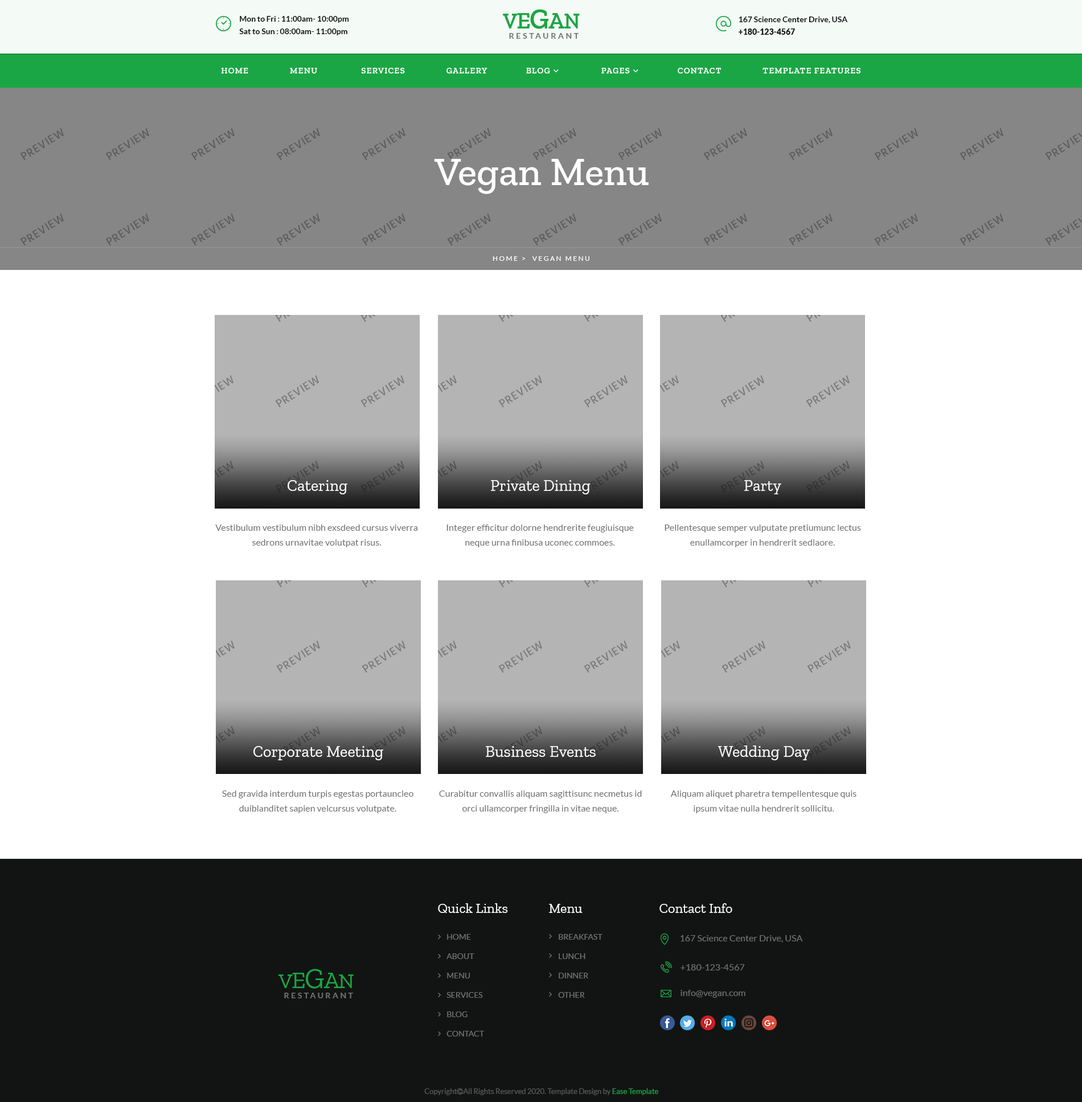
<style>
.page{position:relative;width:1082px;height:1102px;background:#ffffff}
.page>*{position:absolute;margin:0}
.t1{font:8px/12.5px "Lato-Bold";color:#121312}
.t2{font:8px/12.5px "Lato-Regular";color:#121312}
.t3{font:21.6px "ZillaSlab-SemiBold";letter-spacing:-0.03em;color:#1aa644;text-transform:uppercase}
.t4{font:23.9px "ZillaSlab-SemiBold";letter-spacing:-0.03em;color:#1aa644;text-transform:uppercase}
.t5{font:28.5px "ZillaSlab-SemiBold";letter-spacing:-0.03em;color:#1aa644;text-transform:uppercase}
.t6{font:8px/12.5px "Lato-Black";color:#121312}
.t7{font:8px "Lato-Bold";letter-spacing:0.26em;color:#6e726e;text-transform:uppercase}
.t8{font:39.9px "ZillaSlab-Medium";color:#ffffff}
.t9{font:6.8px "Lato-Regular";letter-spacing:0.2em;color:#ffffff;text-transform:uppercase}
.t10{font:15.9px "ZillaSlab-Regular";color:#ffffff}
.t11{font:9.1px/14.8px "Lato-Regular";color:#6e726e}
.t12{font:13.7px "ZillaSlab-Regular";color:#ffffff}
.t13{font:8px/19.4px "Lato-Regular";color:#6e726e;text-transform:uppercase}
.t14{font:9.1px "Lato-Regular";color:#6e726e}
.t15{font:21.6px "ZillaSlab-Regular";letter-spacing:-0.03em;color:#1aa644;text-transform:uppercase}
.t16{font:23.9px "ZillaSlab-Regular";letter-spacing:-0.03em;color:#1aa644;text-transform:uppercase}
.t17{font:28.5px "ZillaSlab-Regular";letter-spacing:-0.03em;color:#1aa644;text-transform:uppercase}
.t18{font:8px "Lato-Bold";letter-spacing:0.25em;color:#6e726e;text-transform:uppercase}
</style>
<div class="page">
<p class="t1" style="left:239px;top:16px;width:110px;height:19px">Mon to Fri<span class="t2"> : </span>11:00am- 10:00pm<br>Sat to Sun<span class="t2"> : </span>08:00am- 11:00pm</p>
<p class="t3" style="left:503px;top:9px;width:77px;height:20px">V<span class="t4">e</span><span class="t5">G</span><span class="t4">a</span>n</p>
<p class="t1" style="left:739px;top:17px;width:109px;height:18px">167 Science Center Drive, USA<br><span class="t6">+180-123-4567</span></p>
<p class="t7" style="left:509px;top:33px;width:70px;height:6px">Restaurant</p>
<p class="t8" style="left:434px;top:159px;width:215px;height:35px">Vegan Menu</p>
<p class="t9" style="left:493px;top:256px;width:96px;height:5px">Home &gt;  Vegan Menu</p>
<p class="t10" style="left:288px;top:480px;width:59px;height:14px">Catering</p>
<p class="t10" style="left:491px;top:480px;width:100px;height:14px">Private Dining</p>
<p class="t10" style="left:744px;top:480px;width:37px;height:14px">Party</p>
<p class="t11" style="left:215px;top:525px;width:202px;height:22px;text-align:center">Vestibulum vestibulum nibh exsdeed cursus viverra sedrons urnavitae volutpat risus.</p>
<p class="t11" style="left:446px;top:525px;width:188px;height:22px;text-align:center">Integer efficitur dolorne hendrerite feugiuisque neque urna finibusa uconec commoes.</p>
<p class="t11" style="left:665px;top:525px;width:196px;height:22px;text-align:center">Pellentesque semper vulputate pretiumunc lectus enullamcorper in hendrerit sedlaore.</p>
<p class="t10" style="left:253px;top:746px;width:130px;height:14px">Corporate Meeting</p>
<p class="t10" style="left:486px;top:746px;width:110px;height:11px">Business Events</p>
<p class="t10" style="left:718px;top:745px;width:92px;height:15px">Wedding Day</p>
<p class="t11" style="left:222px;top:790px;width:191px;height:23px;text-align:center">Sed gravida interdum turpis egestas portauncleo duiblanditet sapien velcursus volutpate.</p>
<p class="t11" style="left:439px;top:790px;width:203px;height:23px;text-align:center">Curabitur convallis aliquam sagittisunc necmetus id orci ullamcorper fringilla in vitae neque.</p>
<p class="t11" style="left:670px;top:790px;width:187px;height:23px;text-align:center">Aliquam aliquet pharetra tempellentesque quis ipsum vitae nulla hendrerit sollicitu.</p>
<p class="t12" style="left:438px;top:903px;width:70px;height:10px">Quick Links</p>
<p class="t12" style="left:549px;top:904px;width:34px;height:9px">Menu</p>
<p class="t12" style="left:659px;top:903px;width:73px;height:10px">Contact Info</p>
<p class="t13" style="left:446px;top:934px;width:38px;height:103px">Home<br>About<br>Menu<br>Services<br>Blog<br>Contact</p>
<p class="t13" style="left:558px;top:934px;width:45px;height:64px">Breakfast<br>Lunch<br>Dinner<br>Other</p>
<p class="t14" style="left:681px;top:935px;width:122px;height:8px">167 Science Center Drive, USA</p>
<p class="t14" style="left:681px;top:964px;width:64px;height:6px">+180-123-4567</p>
<p class="t15" style="left:278px;top:969px;width:76px;height:20px">V<span class="t16">e</span><span class="t17">G</span><span class="t16">a</span>n</p>
<p class="t14" style="left:681px;top:990px;width:64px;height:8px">info@vegan.com</p>
<p class="t18" style="left:284px;top:993px;width:69px;height:5px">Restaurant</p>
</div>
